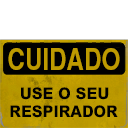
<style>
.page{position:relative;width:128px;height:128px;background:#ffffff}
.page>*{position:absolute;margin:0}
.t1{font:29.4px "Helvetica-Narrow-Bold";color:#bd9a00}
.t2{font:16px "MHeiPRC-Xbold";color:#000000}
</style>
<div class="page">
<p class="t1" style="left:8px;top:48px;width:112px;height:22px">CUIDADO</p>
<p class="t2" style="left:21px;top:87px;width:88px;height:13px">USE O SEU</p>
<p class="t2" style="left:10px;top:105px;width:108px;height:13px">RESPIRADOR</p>
</div>
